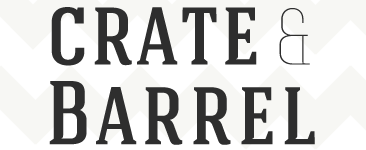
<style>
.page{position:relative;width:366px;height:150px;background:#f7f7f4}
.page>*{position:absolute;margin:0}
.t1{font:90px/79.7px "HaginCapsMedium";letter-spacing:0.05em;color:#2e2e2e}
.t2{font:90px/79.7px "HaginCapsMedium";letter-spacing:0.025em;color:#2e2e2e}
.t3{font:79.7px/79.7px "HaginCapsThin";letter-spacing:-0.05em;color:#2e2e2e}
</style>
<div class="page">
<p class="t1" style="left:49px;top:7px;width:266px;height:138px"><span class="t2">crate </span><span class="t3">&amp;<br></span>Barrel</p>
</div>
